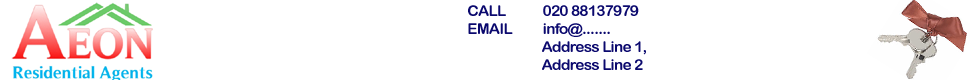
<style>
.page{position:relative;width:970px;height:80px;background:#ffffff}
.page>*{position:absolute;margin:0}
.t1{font:14.9px "ArialRoundedMTBold";letter-spacing:-0.05em;color:#0b096e;scale:1.04 1}
.t2{font:14.9px "ArialRoundedMTBold";letter-spacing:-0.05em;color:#0b096e;text-transform:uppercase;scale:1.04 1}
</style>
<div class="page">
<p class="t1" style="left:468px;top:5px;width:178px;height:65px"><span class="t2">CAll            020 88137979<br>Email          </span>info@.......<br>                        Address Line 1,<br>                        Address Line 2</p>
</div>
